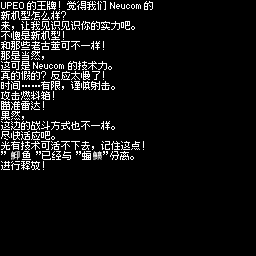
<style>
.page{position:relative;width:256px;height:256px;background:#000000}
.page>*{position:absolute;margin:0}
.t1{font:10px/10px "Fusion-Pixel-10px-Proportional-zh_hans-Regular";color:#ffffff}
.t2{font:10px "Fusion-Pixel-10px-Proportional-zh_hans-Regular";color:#ffffff}
.t3{font:9px "Zpix";color:#ffffff}
</style>
<div class="page">
<p class="t1" style="left:1px;top:1px;width:152px;height:169px">UPEO的王牌！觉得我们Neucom的<br>新机型怎么样？<br>来，让我见识见识你的实力吧。<br>不愧是新机型！<br>和那些老古董可不一样！<br>那是当然，<br>这可是Neucom的技术力。<br>真的假的？反应太慢了！<br>时间……有限，谨慎射击。<br>攻击燃料箱！<br>瞄准雷达！<br>果然，<br>这边的战斗方式也不一样。<br>尽快适应吧。<br>光有技术可活不下去，记住这点！<br><br>进行释放！</p>
<p class="t2" style="left:1px;top:151px;width:133px;height:9px">”    鱼”已经与”蝠  ”分离。</p>
<p class="t3" style="left:11px;top:151px;width:9px;height:9px">鮣</p>
<p class="t3" style="left:93px;top:151px;width:9px;height:9px">鲼</p>
</div>
